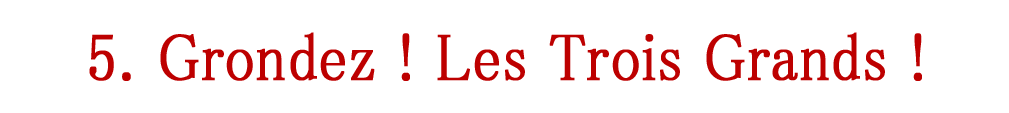
<style>
.page{position:relative;width:1009px;height:113px;background:#ffffff}
.page>*{position:absolute;margin:0}
.t1{font:66.6px "MS-PMincho";color:#bd0000;font-weight:bold;scale:0.89 1}
</style>
<div class="page">
<p class="t1" style="left:89px;top:32px;width:833px;height:49px">5. Grondez ! Les Trois Grands !</p>
</div>
